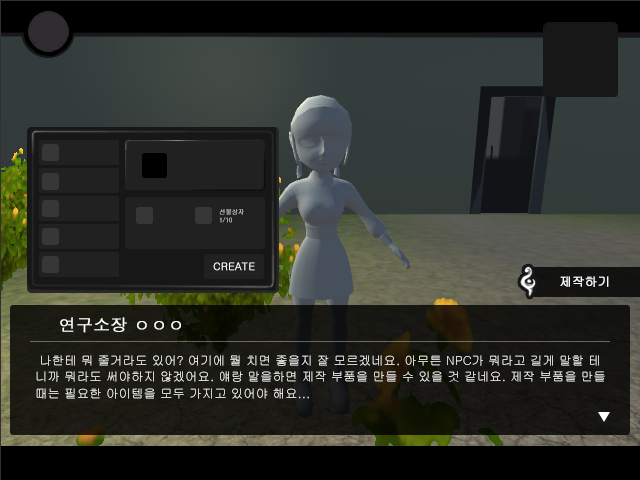
<style>
.page{position:relative;width:640px;height:480px}
.page>*{position:absolute;margin:0}
.t1{font:6.2px/8.3px "Gulim"}
.t2{font:10.4px "Gulim";color:#ffffff;font-weight:bold}
.t3{font:12.5px "Gulim";color:#ffffff;font-weight:bold}
.t4{font:16.7px "Dotum";color:#ffffff;font-weight:bold}
.t5{font:12.5px/16.7px "Gulim";color:#ffffff}
</style>
<div class="page">
<p class="t1" style="left:219px;top:209px;width:25px;height:14px">선물상자<br>1/10</p>
<p class="t2" style="left:213px;top:262px;width:42px;height:9px">CREATE</p>
<p class="t3" style="left:560px;top:276px;width:49px;height:11px">제작하기</p>
<p class="t4" style="left:60px;top:317px;width:121px;height:16px">연구소장 ㅇㅇㅇ</p>
<p class="t5" style="left:36px;top:355px;width:569px;height:44px">나한테 뭐 줄거라도 있어? 여기에 뭘 치면 좋을지 잘 모르겠네요. 아무튼 NPC가 뭐라고 길게 말할 테<br>니까 뭐라도 써야하지 않겠어요. 얘랑 말을하면 제작 부품을 만들 수 있을 것 같네요. 제작 부품을 만들<br>때는 필요한 아이템을 모두 가지고 있어야 해요...</p>
</div>
